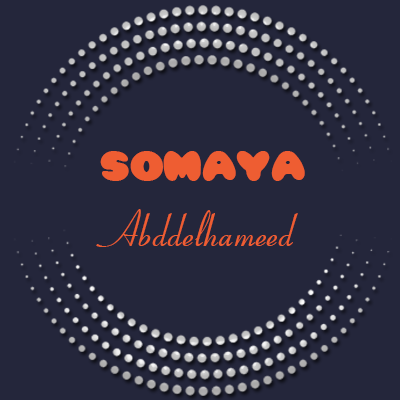
<style>
.page{position:relative;width:400px;height:400px;background:#24263b}
.page>*{position:absolute;margin:0}
.t1{font:37.9px "Pleasantly-Plump";color:#ee5d32;scale:0.95 1}
.t2{font:48px "Coronet";color:#ee5d32;scale:0.95 1}
</style>
<div class="page">
<p class="t1" style="left:100px;top:151px;width:205px;height:30px">Somaya</p>
<p class="t2" style="left:96px;top:209px;width:202px;height:38px">Abddelhameed</p>
</div>
